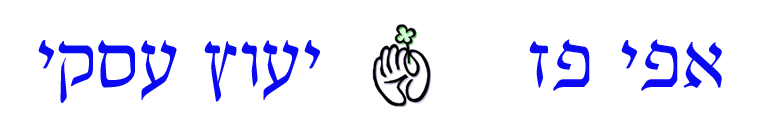
<style>
.page{position:relative;width:775px;height:127px;background:#ffffff}
.page>*{position:absolute;margin:0}
.t1{font:72px "GuttmanSoncino-Light";color:#090af2}
</style>
<div class="page">
<p class="t1" style="left:38px;top:39px;width:684px;height:64px">אפי פז        יעוץ עסקי</p>
</div>
